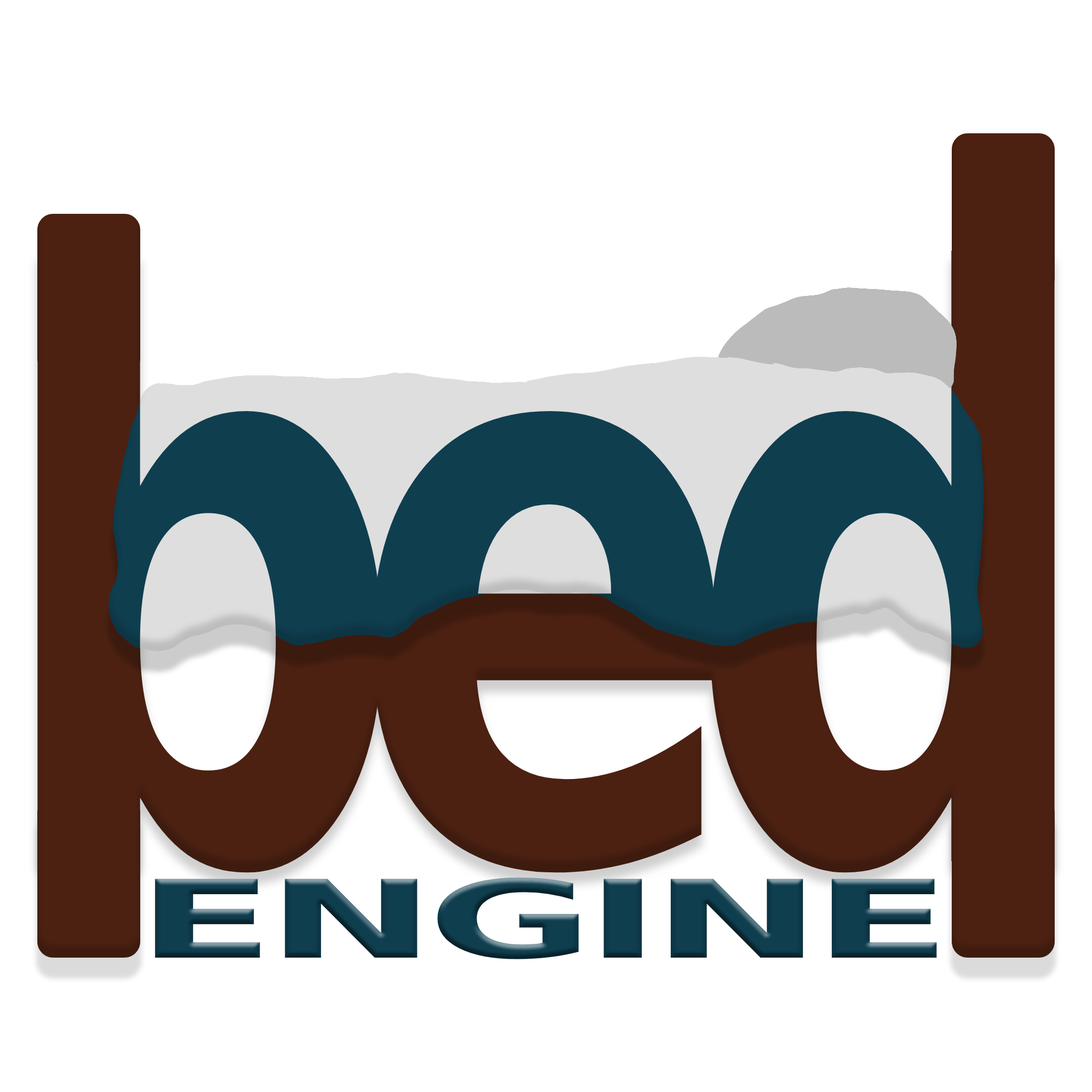
<style>
.page{position:relative;width:1092px;height:1092px;background:#ffffff}
.page>*{position:absolute;margin:0}
.t1{font:803.5px "DejaVuSans-Bold";letter-spacing:-0.104em;color:#443128;scale:0.73 1}
.t2{font:108px "DejaVuSans-Bold";letter-spacing:-0.104em;color:#0f3e4f;scale:1.87 1}
</style>
<div class="page">
<p class="t1" style="left:37px;top:251px;width:1018px;height:622px">bed</p>
<p class="t2" style="left:155px;top:877px;width:782px;height:82px">ENGINE</p>
</div>
